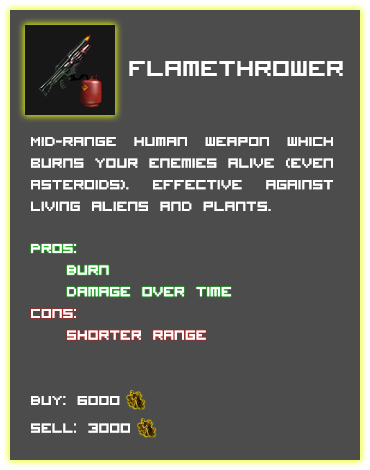
<style>
.page{position:relative;width:370px;height:470px;background:#4c4c4c}
.page>*{position:absolute;margin:0}
.t1{font:30px "VisitorTT1BRK";color:#ffffff}
.t2{font:18px "VisitorTT1BRK";color:#ffffff}
</style>
<div class="page">
<p class="t1" style="left:129px;top:61px;width:214px;height:15px">Flamethrower</p>
<p class="t2" style="left:31px;top:137px;width:302px;height:74px;text-align:justify">Mid-range human weapon which burns your enemies alive (even asteroids). Effective against living aliens and plants.</p>
<p class="t2" style="left:31px;top:244px;width:200px;height:53px;text-align:justify">Pros:<br> Burn<br> Damage over time</p>
<p class="t2" style="left:31px;top:309px;width:175px;height:31px;text-align:justify">Cons:<br> Shorter range</p>
<p class="t2" style="left:31px;top:396px;width:99px;height:37px">Buy: 6000    <br> <br>Sell: 3000</p>
</div>
